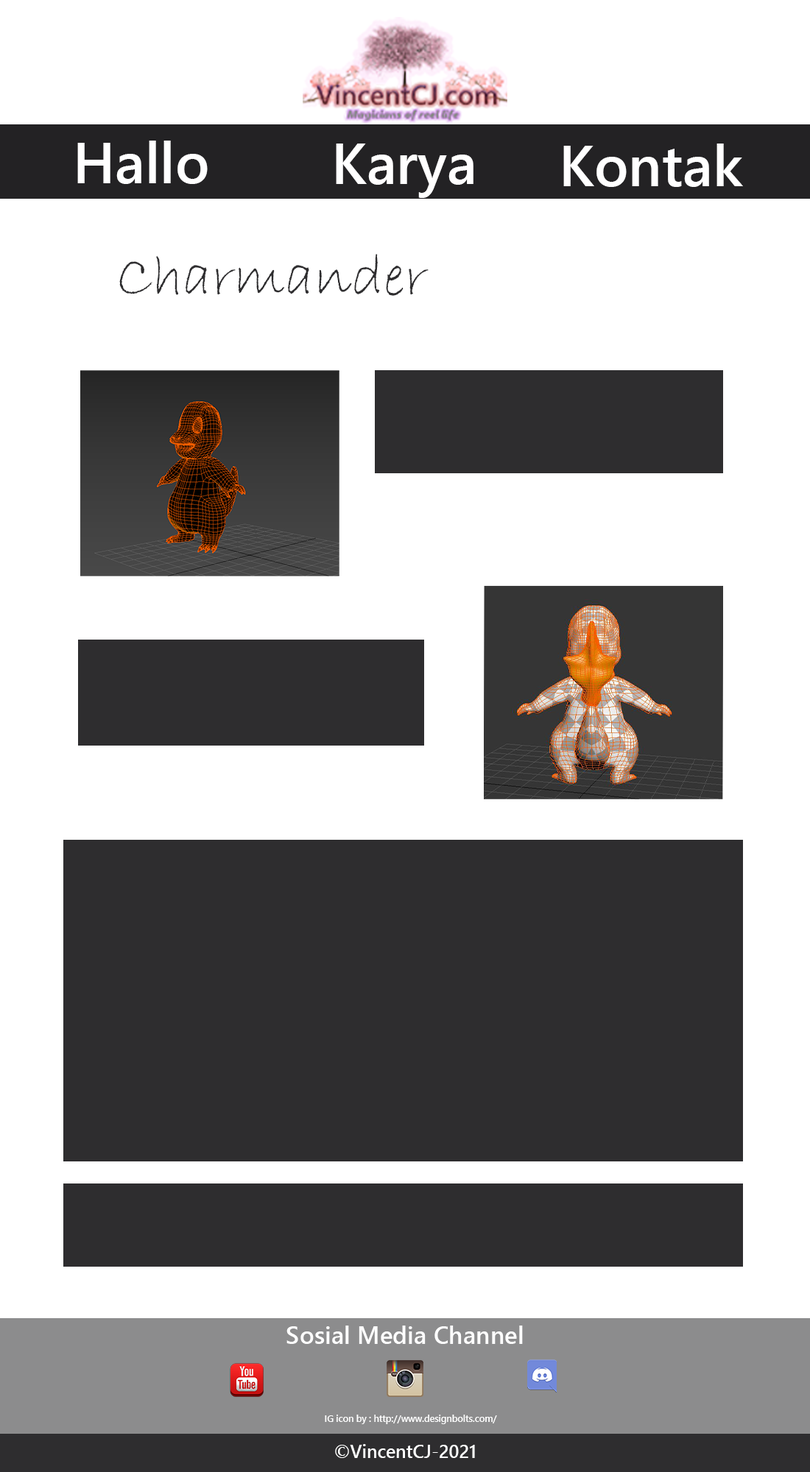
<style>
.page{position:relative;width:810px;height:1472px;background:#ffffff}
.page>*{position:absolute;margin:0}
.t1{font:57.4px "SegoeUI-Semibold";color:#ffffff}
.t2{font:59.2px "BradleyHandITC";color:#2e2d2f}
.t3{font:24.5px "SegoeUI-Semibold";color:#ffffff}
.t4{font:9.2px "SegoeUI-Semibold";color:#ffffff}
.t5{font:18.3px "SegoeUI-Semibold";color:#ffffff}
</style>
<div class="page">
<p class="t1" style="left:77px;top:141px;width:131px;height:43px">Hallo</p>
<p class="t1" style="left:336px;top:144px;width:137px;height:54px">Karya</p>
<p class="t1" style="left:563px;top:144px;width:180px;height:43px">Kontak</p>
<p class="t2" style="left:119px;top:254px;width:309px;height:42px">Charmander</p>
<p class="t3" style="left:286px;top:1326px;width:237px;height:18px">Sosial Media Channel</p>
<p class="t4" style="left:325px;top:1415px;width:172px;height:10px">IG icon by : http://www.designbolts.com/</p>
<p class="t5" style="left:335px;top:1444px;width:140px;height:14px">©VincentCJ-2021</p>
</div>
